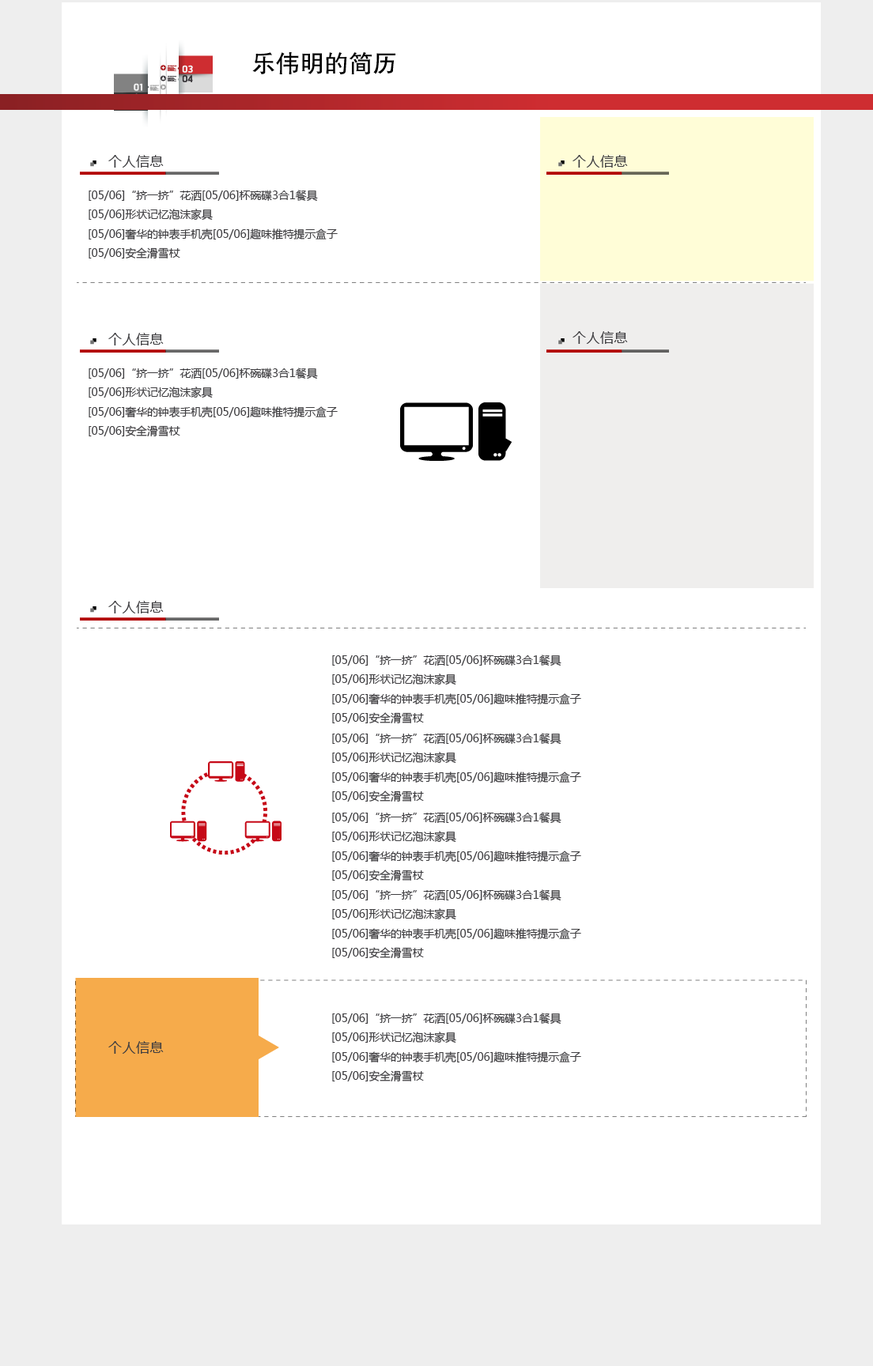
<style>
.page{position:relative;width:873px;height:1366px;background:#ffffff}
.page>*{position:absolute;margin:0}
.t1{font:24.3px "JHeiTi";color:#000000}
.t2{font:13.8px "MicrosoftYaHei";color:#3e3d40}
.t3{font:10.9px/19.4px "MicrosoftYaHei";color:#3e3d40}
</style>
<div class="page">
<p class="t1" style="left:252px;top:52px;width:143px;height:23px">乐伟明的简历</p>
<p class="t2" style="left:108px;top:155px;width:56px;height:13px">个人信息</p>
<p class="t2" style="left:572px;top:155px;width:56px;height:13px">个人信息</p>
<p class="t3" style="left:89px;top:190px;width:249px;height:69px">[05/06]“挤一挤”花洒[05/06]杯碗碟3合1餐具<br>[05/06]形状记忆泡沫家具<br>[05/06]奢华的钟表手机壳[05/06]趣味推特提示盒子<br>[05/06]安全滑雪杖</p>
<p class="t2" style="left:108px;top:333px;width:56px;height:12px">个人信息</p>
<p class="t2" style="left:572px;top:331px;width:56px;height:13px">个人信息</p>
<p class="t3" style="left:89px;top:368px;width:249px;height:68px">[05/06]“挤一挤”花洒[05/06]杯碗碟3合1餐具<br>[05/06]形状记忆泡沫家具<br>[05/06]奢华的钟表手机壳[05/06]趣味推特提示盒子<br>[05/06]安全滑雪杖</p>
<p class="t2" style="left:108px;top:601px;width:56px;height:13px">个人信息</p>
<p class="t3" style="left:332px;top:655px;width:249px;height:68px">[05/06]“挤一挤”花洒[05/06]杯碗碟3合1餐具<br>[05/06]形状记忆泡沫家具<br>[05/06]奢华的钟表手机壳[05/06]趣味推特提示盒子<br>[05/06]安全滑雪杖</p>
<p class="t3" style="left:332px;top:733px;width:249px;height:69px">[05/06]“挤一挤”花洒[05/06]杯碗碟3合1餐具<br>[05/06]形状记忆泡沫家具<br>[05/06]奢华的钟表手机壳[05/06]趣味推特提示盒子<br>[05/06]安全滑雪杖</p>
<p class="t3" style="left:332px;top:812px;width:249px;height:69px">[05/06]“挤一挤”花洒[05/06]杯碗碟3合1餐具<br>[05/06]形状记忆泡沫家具<br>[05/06]奢华的钟表手机壳[05/06]趣味推特提示盒子<br>[05/06]安全滑雪杖</p>
<p class="t3" style="left:332px;top:889px;width:249px;height:69px">[05/06]“挤一挤”花洒[05/06]杯碗碟3合1餐具<br>[05/06]形状记忆泡沫家具<br>[05/06]奢华的钟表手机壳[05/06]趣味推特提示盒子<br>[05/06]安全滑雪杖</p>
<p class="t3" style="left:332px;top:1013px;width:249px;height:69px">[05/06]“挤一挤”花洒[05/06]杯碗碟3合1餐具<br>[05/06]形状记忆泡沫家具<br>[05/06]奢华的钟表手机壳[05/06]趣味推特提示盒子<br>[05/06]安全滑雪杖</p>
<p class="t2" style="left:108px;top:1041px;width:56px;height:13px">个人信息</p>
</div>
